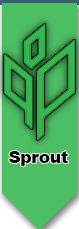
<style>
.page{position:relative;width:79px;height:229px;background:#4cbe64}
.page>*{position:absolute;margin:0}
.t1{font:16.7px "Arial-Black";letter-spacing:-0.01em;color:#000000}
</style>
<div class="page">
<p class="t1" style="left:9px;top:151px;width:59px;height:15px">Sprout</p>
</div>
